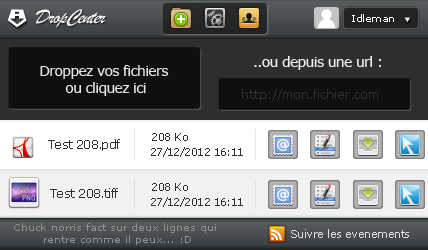
<style>
.page{position:relative;width:428px;height:250px}
.page>*{position:absolute;margin:0}
.t1{font:21px "BrushScriptMT";letter-spacing:-0.05em;color:#ffffff;font-style:italic}
.t2{font:10px "Verdana";letter-spacing:-0.05em;color:#ffffff}
.t3{font:14px "Verdana";letter-spacing:-0.05em;color:#e5e5e5}
.t4{font:14px "Verdana";letter-spacing:-0.05em;color:#f1f1f1}
.t5{font:12px "Verdana";color:#303030}
.t6{font:11px "Verdana";letter-spacing:-0.05em;color:#2e2e2e}
.t7{font:12px "Verdana";letter-spacing:-0.05em;color:#303030}
.t8{font:11px "Verdana";letter-spacing:-0.05em;color:#e0e0e0}
.t9{font:10px "Verdana";color:#919191}
</style>
<div class="page">
<p class="t1" style="left:36px;top:9px;width:70px;height:19px">DropCenter</p>
<p class="t2" style="left:352px;top:14px;width:42px;height:8px">Idleman</p>
<p class="t3" style="left:40px;top:65px;width:129px;height:31px;text-align:center">Droppez vos fichiers <br>ou cliquez ici</p>
<p class="t4" style="left:254px;top:56px;width:127px;height:14px">..ou depuis une url :</p>
<p class="t5" style="left:242px;top:89px;width:136px;height:12px">http://mon.fichier.com</p>
<p class="t6" style="left:152px;top:133px;width:36px;height:8px">208 Ko</p>
<p class="t7" style="left:48px;top:139px;width:72px;height:12px">Test 208.pdf</p>
<p class="t6" style="left:151px;top:147px;width:92px;height:10px">27/12/2012 16:11</p>
<p class="t6" style="left:152px;top:183px;width:36px;height:8px">208 Ko</p>
<p class="t7" style="left:50px;top:188px;width:68px;height:10px">Test 208.tiff</p>
<p class="t6" style="left:151px;top:197px;width:92px;height:10px">27/12/2012 16:11</p>
<p class="t8" style="left:291px;top:229px;width:118px;height:9px">Suivre les evenements</p>
<p class="t9" style="left:44px;top:235px;width:147px;height:10px">rentre comme il peux... :D</p>
</div>
